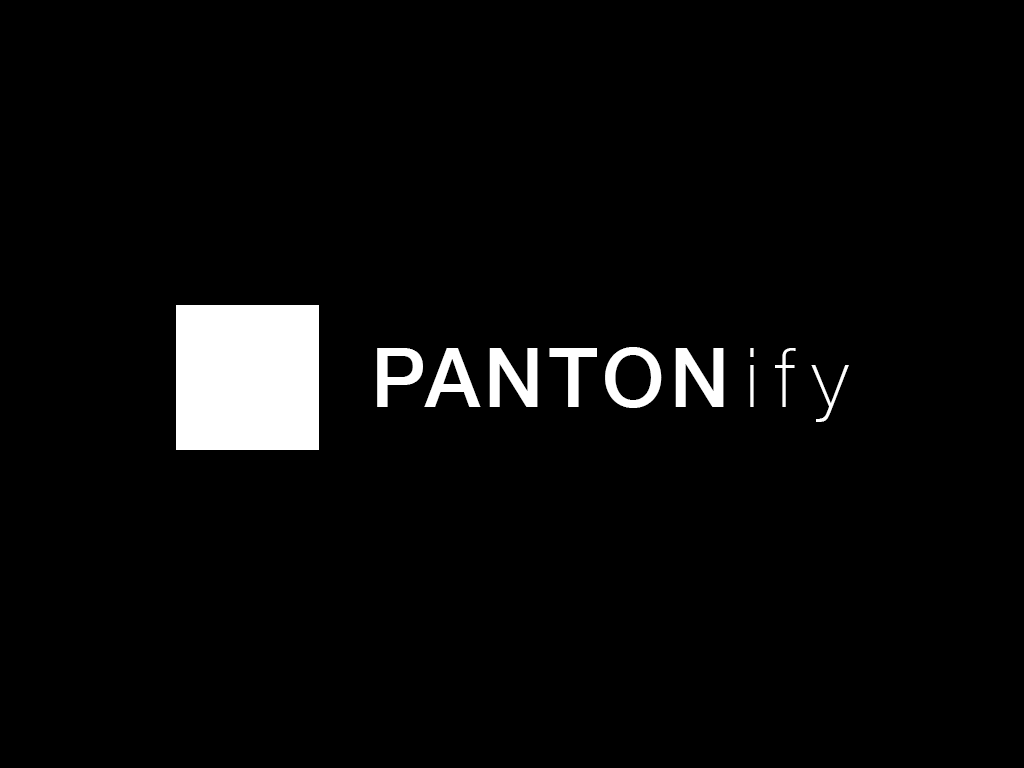
<style>
.page{position:relative;width:1024px;height:768px;background:#000000}
.page>*{position:absolute;margin:0}
.t1{font:81.7px "HelveticaNeue-Medium";letter-spacing:0.06em;color:#ffffff}
.t2{font:81.7px "HelveticaNeue-Medium";letter-spacing:0.2em;color:#ffffff}
.t3{font:81.7px "HelveticaNeue-Thin";letter-spacing:0.2em;color:#ffffff}
</style>
<div class="page">
<p class="t1" style="left:377px;top:347px;width:472px;height:75px">PANTO<span class="t2">N</span><span class="t3">ify</span></p>
</div>
